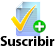
<style>
.page{position:relative;width:55px;height:48px;background:#ffffff}
.page>*{position:absolute;margin:0}
.t1{font:14px "MyriadPro-Bold";color:#010101}
</style>
<div class="page">
<p class="t1" style="left:0px;top:36px;width:55px;height:10px">Suscribir</p>
</div>
